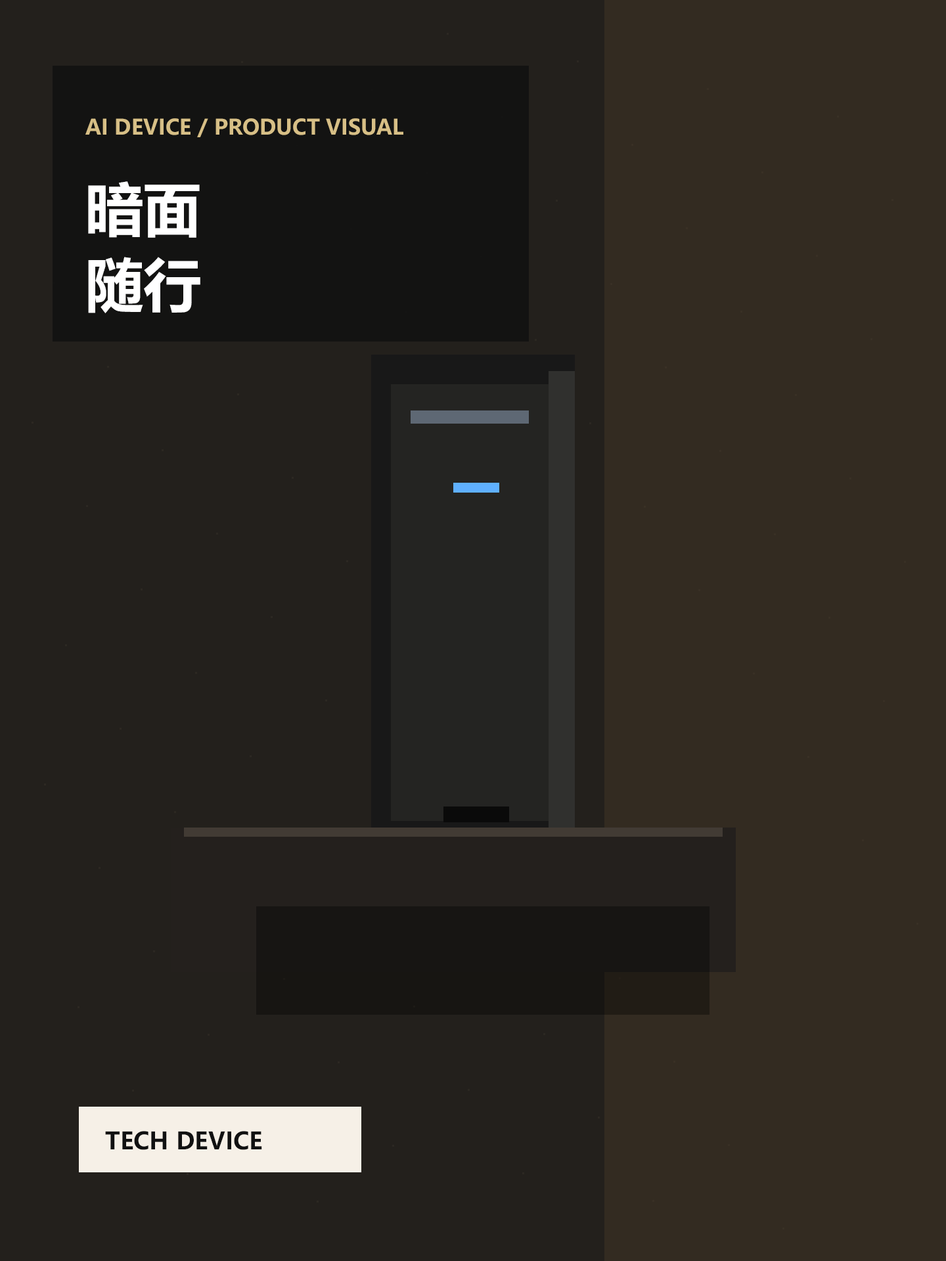
<style>
.page{position:relative;width:946px;height:1261px;background:#23201c}
.page>*{position:absolute;margin:0}
.t1{font:21px "MicrosoftYaHeiUI-Bold";color:#d7bf86}
.t2{font:57.8px "MicrosoftYaHeiUI-Bold";color:#ffffff}
.t3{font:23.6px "MicrosoftYaHeiUI-Bold";color:#111111}
</style>
<div class="page">
<p class="t1" style="left:85px;top:118px;width:318px;height:19px">AI DEVICE / PRODUCT VISUAL</p>
<p class="t2" style="left:88px;top:181px;width:112px;height:57px">暗面</p>
<p class="t2" style="left:88px;top:257px;width:112px;height:56px">随行</p>
<p class="t3" style="left:105px;top:1131px;width:157px;height:19px">TECH DEVICE</p>
</div>
